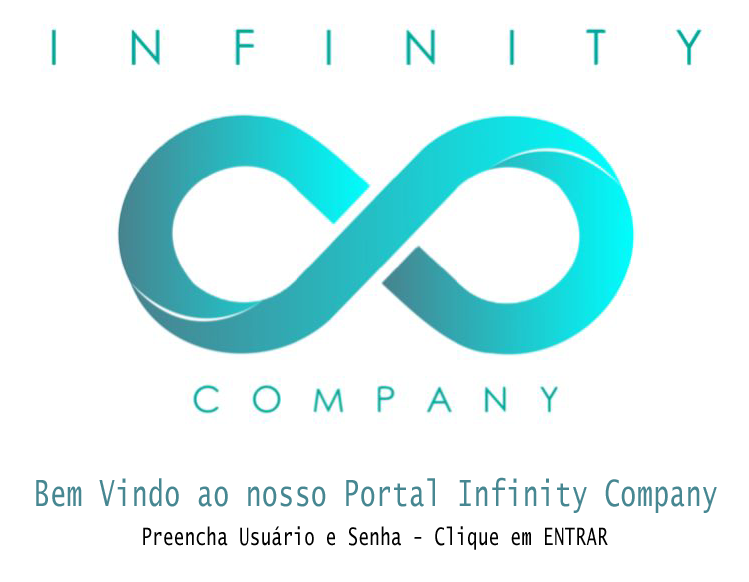
<style>
.page{position:relative;width:749px;height:582px;background:#ffffff}
.page>*{position:absolute;margin:0}
.t1{font:36px "LucidaSans-Typewriter";letter-spacing:0.025em;color:#478791;scale:0.72 1}
.t2{font:24px "LucidaSans-Typewriter";letter-spacing:0.025em;color:#000000;scale:0.72 1}
</style>
<div class="page">
<p class="t1" style="left:36px;top:477px;width:681px;height:36px">Bem Vindo ao nosso Portal Infinity Company</p>
<p class="t2" style="left:143px;top:526px;width:465px;height:24px">Preencha Usuário e Senha - Clique em ENTRAR</p>
</div>
